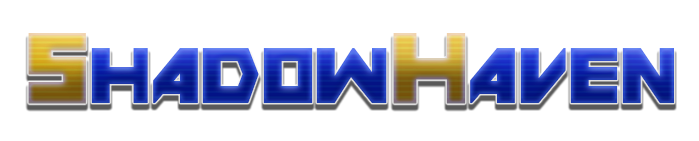
<style>
.page{position:relative;width:699px;height:141px;background:#ffffff}
.page>*{position:absolute;margin:0}
.t1{font:72px "FLASTY-Regular";font-weight:bold}
.t2{font:92px "FLASTY-Regular";font-weight:bold}
</style>
<div class="page">
<p class="t1" style="left:28px;top:33px;width:646px;height:71px"><span class="t2">S</span>HADOW<span class="t2">H</span>AVEN</p>
</div>
